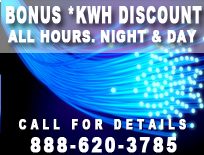
<style>
.page{position:relative;width:204px;height:155px}
.page>*{position:absolute;margin:0}
.t1{font:22.7px "Arial-Black";letter-spacing:0.06em;color:#ffffff;font-weight:bold;scale:0.56 1}
.t2{font:17.4px "Arial-Black";color:#ffffff;font-weight:bold;scale:0.72 1}
.t3{font:13px "Arial-Black";letter-spacing:0.34em;color:#ffffff;font-weight:bold;scale:0.8 1}
.t4{font:20px "Arial-Black";letter-spacing:0.14em;color:#ffffff;font-weight:bold;scale:0.8 1}
</style>
<div class="page">
<p class="t1" style="left:5px;top:6px;width:197px;height:18px">BONUS *KWH DISCOUNT</p>
<p class="t2" style="left:8px;top:30px;width:189px;height:13px">ALL HOURS. NIGHT &amp; DAY</p>
<p class="t3" style="left:19px;top:119px;width:167px;height:11px">CALL FOR DETAILS</p>
<p class="t4" style="left:30px;top:137px;width:147px;height:16px">888-620-3785</p>
</div>
